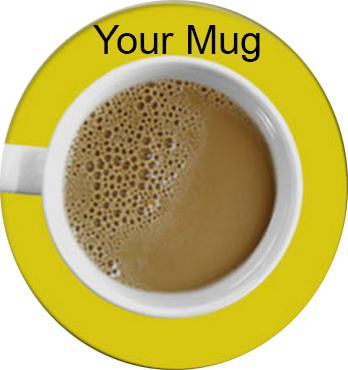
<style>
.page{position:relative;width:348px;height:370px;background:#ffffff}
.page>*{position:absolute;margin:0}
.t1{font:40px "ArialMT";color:#000000}
</style>
<div class="page">
<p class="t1" style="left:93px;top:25px;width:167px;height:37px">Your Mug</p>
</div>
